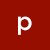
<style>
.page{position:relative;width:50px;height:50px;background:#960e00}
.page>*{position:absolute;margin:0}
.t1{font:24.8px "Montserrat-Regular";color:#ffffff}
</style>
<div class="page">
<p class="t1" style="left:18px;top:16px;width:14px;height:19px">p</p>
</div>
